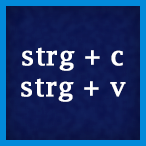
<style>
.page{position:relative;width:146px;height:146px}
.page>*{position:absolute;margin:0}
.t1{font:26.3px "LucidaFax";color:#ffffff;font-weight:bold}
</style>
<div class="page">
<p class="t1" style="left:21px;top:47px;width:105px;height:55px;text-align:center">strg + c<br>strg + v</p>
</div>
